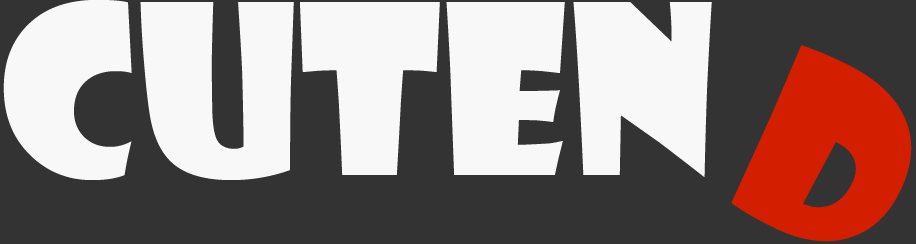
<style>
.page{position:relative;width:916px;height:244px;background:#333333}
.page>*{position:absolute;margin:0}
.t1{font:230px "ShowcardGothic-Reg";color:#f8f8f8}
.t2{font:230px "ShowcardGothic-Reg";color:#d31e00}
</style>
<div class="page">
<p class="t1" style="left:3px;top:0px;width:709px;height:180px">CUTEN</p>
<p class="t2" style="left:731px;top:45px;width:181px;height:197px;rotate:27deg">D</p>
</div>
